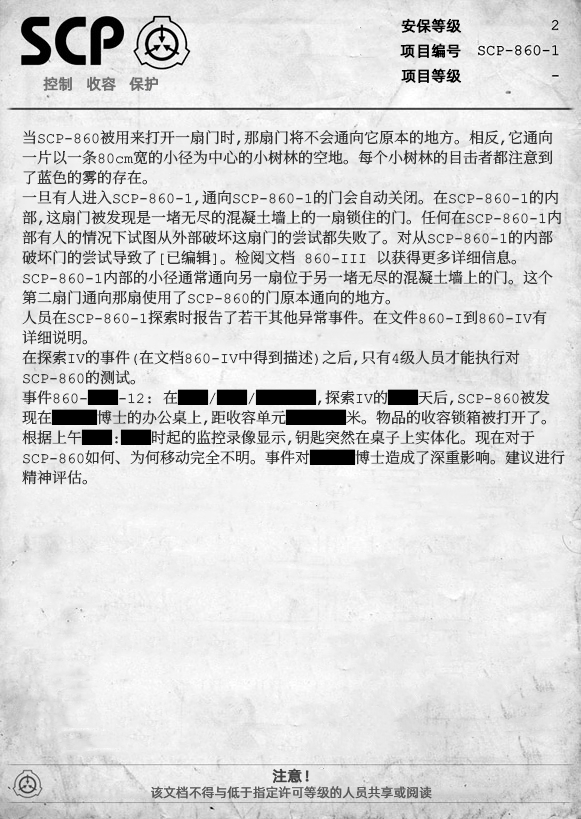
<style>
.page{position:relative;width:581px;height:819px}
.page>*{position:absolute;margin:0}
.t1{font:15px "AlibabaPuHuiTiR";color:#000000;font-weight:bold}
.t2{font:15px "AlibabaPuHuiTiR";color:#707070;font-weight:bold}
.t3{font:15px/20px "ContainmentBreach-Regular";color:#353535}
.t4{font:15px/20px "ContainmentBreach-Regular";color:#000000}
.t5{font:15px "AlibabaPuHuiTiR";color:#414141;font-weight:bold}
.t6{font:13px "AlibabaPuHuiTiR";color:#575757}
</style>
<div class="page">
<p class="t1" style="left:401px;top:18px;width:61px;height:15px">安保等级</p>
<p class="t1" style="left:400px;top:43px;width:61px;height:15px">项目编号</p>
<p class="t2" style="left:43px;top:76px;width:115px;height:15px">控制   收容   保护</p>
<p class="t1" style="left:401px;top:68px;width:61px;height:15px">项目等级</p>
<p class="t3" style="left:22px;top:130px;width:543px;height:355px">当SCP-860被用来打开一扇门时，那扇门将不会通向它原本的地方。相反，它通向<br>一片以一条80cm宽的小径为中心的小树林的空地。每个小树林的目击者都注意到<br>了蓝色的雾的存在。<br>一旦有人进入SCP-860-1，通向SCP-860-1的门会自动关闭。在SCP-860-1的内<br>部，这扇门被发现是一堵无尽的混凝土墙上的一扇锁住的门。任何在SCP-860-1内<br>部有人的情况下试图从外部破坏这扇门的尝试都失败了。对从SCP-860-1的内部<br>破坏门的尝试导致了[已编辑]。检阅文档 860-III 以获得更多详细信息。<br>SCP-860-1内部的小径通常通向另一扇位于另一堵无尽的混凝土墙上的门。这个<br>第二扇门通向那扇使用了SCP-860的门原本通向的地方。<br>人员在SCP-860-1探索时报告了若干其他异常事件。在文件860-I到860-IV有<br>详细说明。<br>在探索IV的事件（在文档860-IV中得到描述）之后，只有4级人员才能执行对<br>SCP-860的测试。<br>事件860-<span class="t4">██</span>-12： 在<span class="t4">██</span>/<span class="t4">██</span>/<span class="t4">████</span>，探索IV的<span class="t4">██</span>天后，SCP-860被发<br>现在<span class="t4">███</span>博士的办公桌上，距收容单元<span class="t4">████</span>米。物品的收容锁箱被打开了。<br>根据上午<span class="t4">██</span>:<span class="t4">██</span>时起的监控录像显示，钥匙突然在桌子上实体化。现在对于<br>SCP-860如何、为何移动完全不明。事件对<span class="t4">███</span>博士造成了深重影响。建议进行<br>精神评估。</p>
<p class="t5" style="left:272px;top:768px;width:37px;height:15px">注意！</p>
<p class="t6" style="left:151px;top:786px;width:281px;height:13px">该文档不得与低于指定许可等级的人员共享或阅读</p>
</div>
